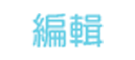
<style>
.page{position:relative;width:135px;height:60px;background:#ffffff}
.page>*{position:absolute;margin:0}
.t1{font:36.7px "DFYuan-Md-HK-BF";color:#61cee5}
</style>
<div class="page">
<p class="t1" style="left:31px;top:13px;width:73px;height:35px">編輯</p>
</div>
